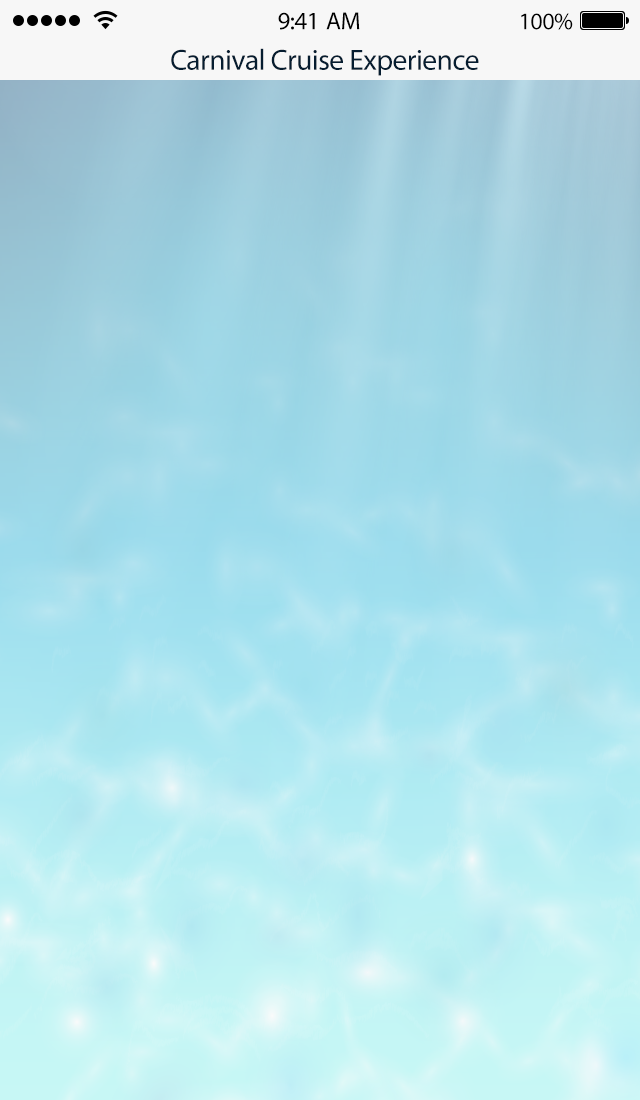
<style>
.page{position:relative;width:640px;height:1100px}
.page>*{position:absolute;margin:0}
.t1{font:25px "MyriadPro-Regular";letter-spacing:-0.02em;color:#000000}
.t2{font:24px "MyriadPro-Regular";letter-spacing:-0.02em;color:#000000}
.t3{font:29.4px "MyriadPro-Regular";letter-spacing:-0.02em;color:#061d30}
</style>
<div class="page">
<p class="t1" style="left:278px;top:12px;width:82px;height:18px">9:41 AM</p>
<p class="t2" style="left:521px;top:13px;width:52px;height:17px">100%</p>
<p class="t3" style="left:171px;top:48px;width:308px;height:28px">Carnival Cruise Experience</p>
</div>
